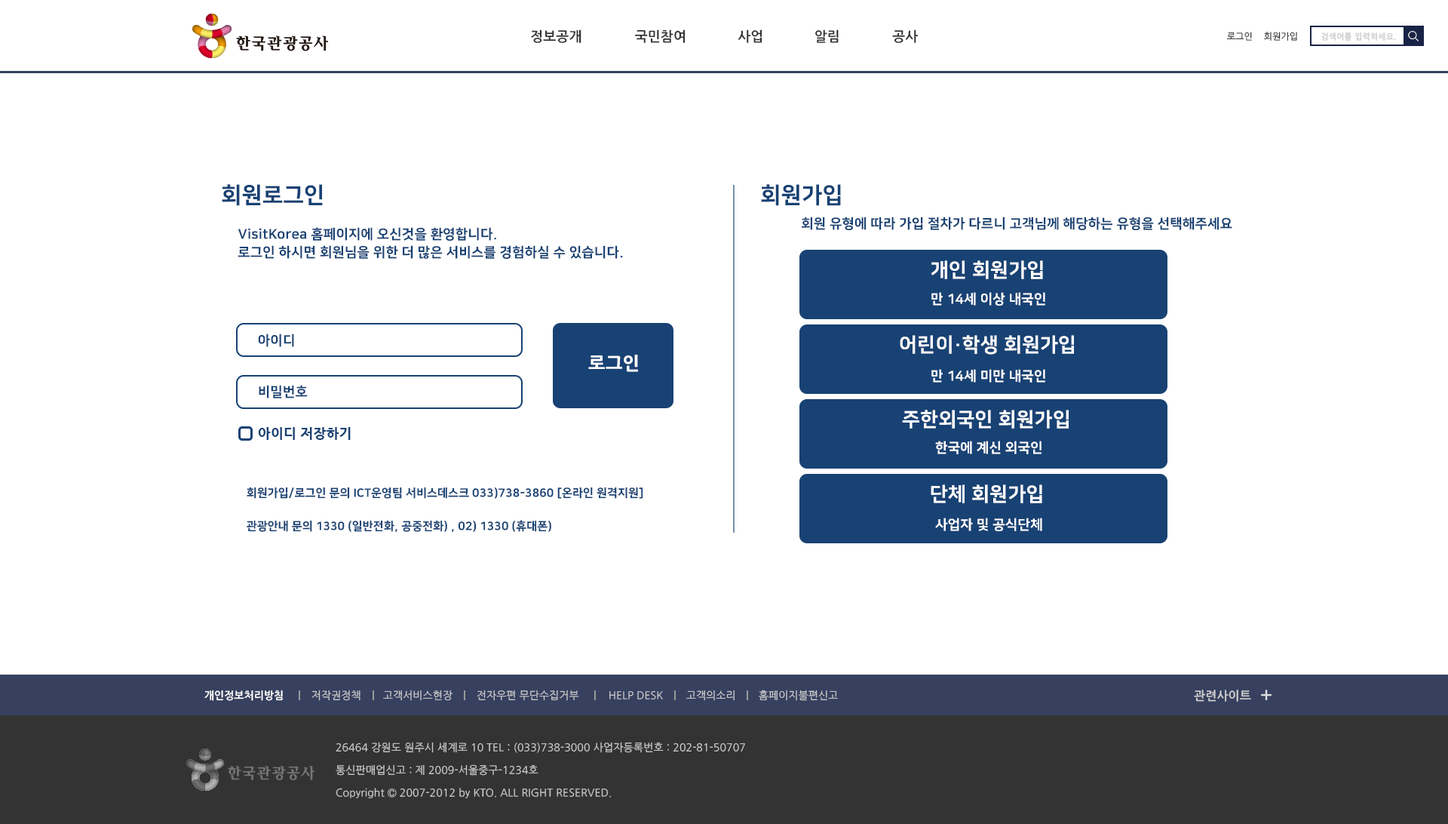
<style>
.page{position:relative;width:1448px;height:824px;background:#ffffff}
.page>*{position:absolute;margin:0}
.t1{font:13.6px "NanumGothicBold";letter-spacing:0.01em;color:#333333}
.t2{font:9px "NanumGothic";letter-spacing:0.01em;color:#333333}
.t3{font:8.3px "NanumGothicBold";letter-spacing:0.05em;color:#cccccc;scale:0.95 1}
.t4{font:22.6px "NanumSquareEB";letter-spacing:0.01em;color:#184274}
.t5{font:13.6px "NanumSquareEB";letter-spacing:0.01em;color:#184274}
.t6{font:13.6px/18.1px "NanumSquareEB";letter-spacing:0.01em;color:#184274}
.t7{font:19.6px "NanumSquareEB";letter-spacing:0.01em;color:#ffffff}
.t8{font:13.6px "NanumSquareEB";letter-spacing:0.01em;color:#ffffff}
.t9{font:18.1px "NanumGothicExtraBold";letter-spacing:0.01em;color:#ffffff}
.t10{font:13.6px "NanumGothicExtraBold";letter-spacing:0.01em;color:#184274}
.t11{font:11.5px "NanumSquareEB";letter-spacing:0.01em;color:#184274}
.t12{font:10.6px "NanumGothicBold";letter-spacing:0.01em;color:#ffffff}
.t13{font:10.6px "NanumGothic";letter-spacing:0.01em;color:#cccccc}
.t14{font:12.1px "NanumGothicBold";letter-spacing:0.01em;color:#cccccc}
.t15{font:10.6px/22.6px "NanumGothic";letter-spacing:0.01em;color:#cccccc}
</style>
<div class="page">
<p class="t1" style="left:531px;top:29px;width:50px;height:14px">정보공개</p>
<p class="t1" style="left:635px;top:29px;width:51px;height:14px">국민참여</p>
<p class="t1" style="left:738px;top:29px;width:24px;height:14px">사업</p>
<p class="t1" style="left:815px;top:29px;width:24px;height:14px">알림</p>
<p class="t1" style="left:892px;top:29px;width:27px;height:14px">공사</p>
<p class="t2" style="left:1226px;top:32px;width:26px;height:9px">로그인</p>
<p class="t2" style="left:1264px;top:32px;width:33px;height:9px">회원가입</p>
<p class="t3" style="left:1321px;top:32px;width:75px;height:9px">검색어를 입력하세요.</p>
<p class="t4" style="left:222px;top:184px;width:101px;height:22px">회원로그인</p>
<p class="t4" style="left:761px;top:184px;width:80px;height:22px">회원가입</p>
<p class="t5" style="left:802px;top:216px;width:430px;height:14px">회원 유형에 따라 가입 절차가 다르니 고객님께 해당하는 유형을 선택해주세요</p>
<p class="t6" style="left:238px;top:227px;width:385px;height:32px">VisitKorea 홈페이지에 오신것을 환영합니다.<br>로그인 하시면 회원님을 위한 더 많은 서비스를 경험하실 수 있습니다.</p>
<p class="t7" style="left:931px;top:260px;width:112px;height:19px">개인 회원가입</p>
<p class="t8" style="left:931px;top:292px;width:114px;height:13px">만 14세 이상 내국인</p>
<p class="t5" style="left:258px;top:333px;width:36px;height:14px">아이디</p>
<p class="t7" style="left:900px;top:335px;width:174px;height:19px">어린이·학생 회원가입</p>
<p class="t9" style="left:588px;top:354px;width:50px;height:18px">로그인</p>
<p class="t8" style="left:931px;top:369px;width:114px;height:13px">만 14세 미만 내국인</p>
<p class="t5" style="left:259px;top:385px;width:49px;height:13px">비밀번호</p>
<p class="t7" style="left:902px;top:410px;width:167px;height:18px">주한외국인 회원가입</p>
<p class="t10" style="left:258px;top:427px;width:93px;height:13px">아이디 저장하기</p>
<p class="t8" style="left:935px;top:440px;width:106px;height:14px">한국에 계신 외국인</p>
<p class="t7" style="left:931px;top:484px;width:111px;height:19px">단체 회원가입</p>
<p class="t11" style="left:247px;top:486px;width:396px;height:12px">회원가입/로그인 문의 ICT운영팀 서비스데스크 033)738-3860 [온라인 원격지원]</p>
<p class="t11" style="left:247px;top:520px;width:304px;height:12px">관광안내 문의 1330 (일반전화, 공중전화) , 02) 1330 (휴대폰)</p>
<p class="t8" style="left:935px;top:517px;width:107px;height:14px">사업자 및 공식단체</p>
<p class="t12" style="left:204px;top:689px;width:79px;height:12px">개인정보처리방침</p>
<p class="t13" style="left:311px;top:689px;width:49px;height:12px">저작권정책</p>
<p class="t13" style="left:383px;top:689px;width:69px;height:12px">고객서비스현장</p>
<p class="t13" style="left:477px;top:689px;width:102px;height:12px">전자우편 무단수집거부</p>
<p class="t13" style="left:686px;top:689px;width:49px;height:12px">고객의소리</p>
<p class="t13" style="left:759px;top:689px;width:79px;height:12px">홈페이지불편신고</p>
<p class="t14" style="left:1194px;top:689px;width:57px;height:12px">관련사이트</p>
<p class="t13" style="left:609px;top:690px;width:54px;height:9px">HELP DESK</p>
<p class="t15" style="left:336px;top:741px;width:409px;height:57px">26464 강원도 원주시 세계로 10 TEL : (033)738-3000 사업자등록번호 : 202-81-50707<br>통신판매업신고 : 제 2009-서울중구-1234호<br>Copyright © 2007-2012 by KTO. ALL RIGHT RESERVED.</p>
</div>
